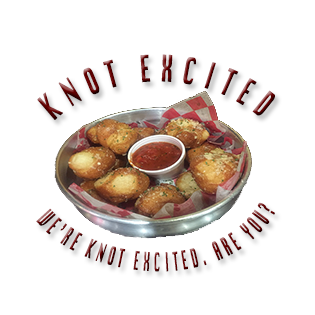
<style>
.page{position:relative;width:315px;height:315px;background:#ffffff}
.page>*{position:absolute;margin:0}
.t1{font:35.5px/0px "Krungthep";letter-spacing:0.46em;font-weight:bold;scale:0.5 1}
.t2{font:25px "Krungthep";letter-spacing:0.46em;font-weight:bold;scale:0.38 1}
</style>
<div class="page">
<p class="t1" style="left:37px;top:54px;width:238px;height:66px;text-align:center">KNOT EXCITED</p>
<p class="t2" style="left:36px;top:202px;width:239px;height:70px;rotate:-1deg">WE’RE KNOT EXCITED. ARE YOU?</p>
</div>
